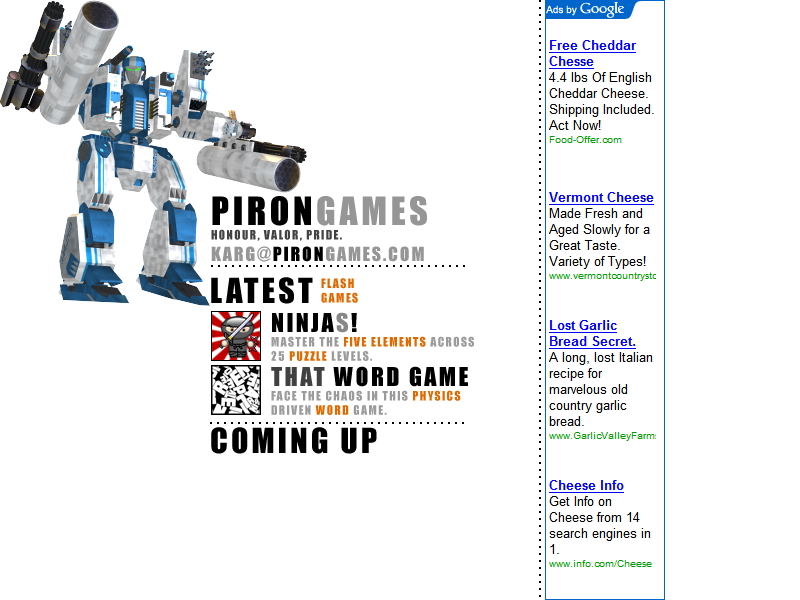
<style>
.page{position:relative;width:800px;height:600px;background:#ffffff}
.page>*{position:absolute;margin:0}
.t1{font:12px "Impact";letter-spacing:0.1em;color:#424242;text-transform:uppercase}
.t2{font:36px "Impact";letter-spacing:0.1em;color:#000000;text-transform:uppercase}
.t3{font:36px "Impact";letter-spacing:0.1em;color:#969696;text-transform:uppercase}
.t4{font:18px "Impact";letter-spacing:0.1em;color:#969696;text-transform:uppercase}
.t5{font:18px "Impact";letter-spacing:0.1em;color:#000000;text-transform:uppercase}
.t6{font:32px "Impact";letter-spacing:0.1em;color:#000000;text-transform:uppercase}
.t7{font:12px "Impact";letter-spacing:0.1em;color:#e06900;text-transform:uppercase}
.t8{font:24px "Impact";letter-spacing:0.1em;color:#000000;text-transform:uppercase}
.t9{font:24px "Impact";letter-spacing:0.1em;color:#888888;text-transform:uppercase}
.t10{font:12px "Impact";letter-spacing:0.1em;color:#9b9b9b;text-transform:uppercase}
.t11{font:24px "Impact";letter-spacing:0.1em;color:#414141;text-transform:uppercase}
</style>
<div class="page">
<p class="t1" style="left:211px;top:196px;width:216px;height:66px"><span class="t2">PIRON</span><span class="t3">GAMES<br></span>HONOUR, VALOR, PRIDE.<br><span class="t4">KARG@</span><span class="t5">PIRON</span><span class="t4">GAMES.COM</span></p>
<p class="t6" style="left:211px;top:277px;width:102px;height:27px">LATEST</p>
<p class="t7" style="left:321px;top:278px;width:37px;height:25px">FLASH<br>GAMES</p>
<p class="t7" style="left:271px;top:312px;width:203px;height:49px"><span class="t8">NINJA</span><span class="t9">S</span><span class="t8">!<br></span><span class="t10">MASTER THE </span>FIVE ELEMENTS <span class="t10">ACROSS <br>25 </span>PUZZLE<span class="t10"> LEVELS.</span></p>
<p class="t10" style="left:271px;top:366px;width:197px;height:49px"><span class="t11">THAT</span><span class="t8"> WORD GAME<br></span>FACE THE CHAOS IN THIS <span class="t7">PHYSICS<br></span>DRIVEN <span class="t7">WORD </span>GAME.</p>
<p class="t6" style="left:211px;top:427px;width:166px;height:27px">COMING UP</p>
</div>
